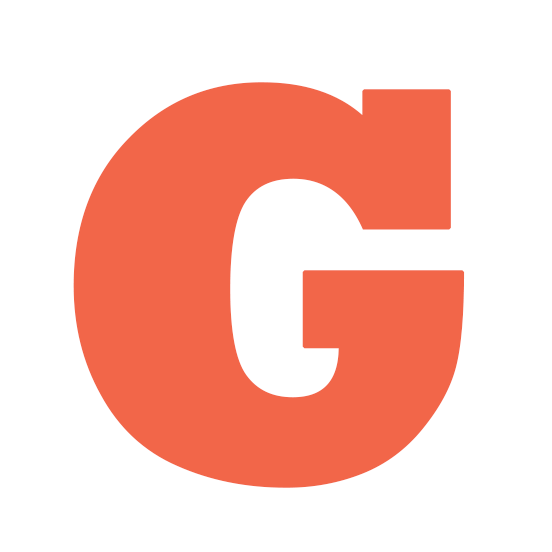
<style>
.page{position:relative;width:552px;height:552px;background:#ffffff}
.page>*{position:absolute;margin:0}
.t1{font:572.3px "Rockwell-ExtraBold";color:#f26649;font-weight:bold;scale:0.91 1}
</style>
<div class="page">
<p class="t1" style="left:73px;top:82px;width:392px;height:406px">G</p>
</div>
